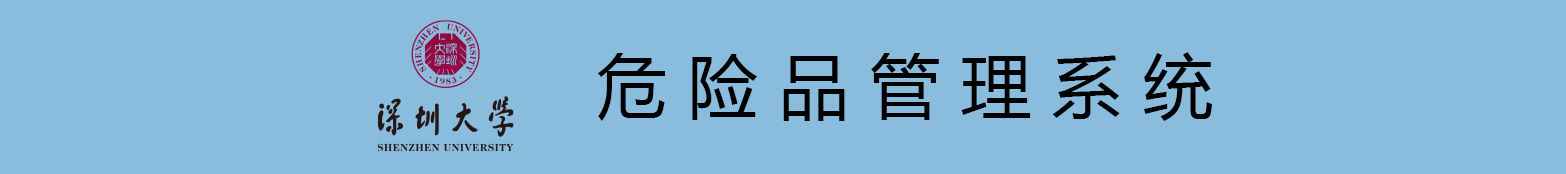
<style>
.page{position:relative;width:1566px;height:174px;background:#8abcdd}
.page>*{position:absolute;margin:0}
.t1{font:70px "YaHei-Consolas-Hybrid";letter-spacing:0.3em;color:#000000}
</style>
<div class="page">
<p class="t1" style="left:597px;top:52px;width:615px;height:69px">危险品管理系统</p>
</div>
